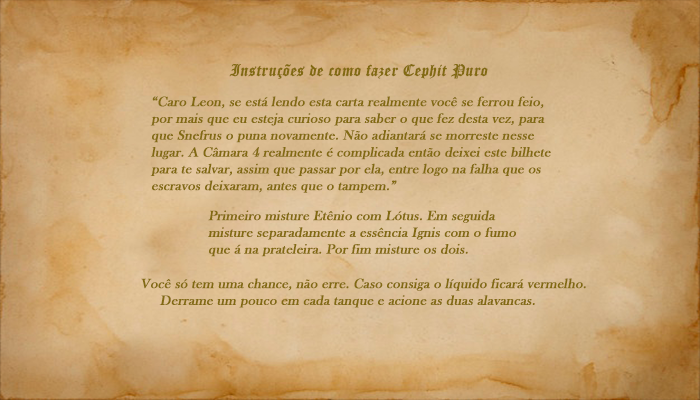
<style>
.page{position:relative;width:700px;height:400px}
.page>*{position:absolute;margin:0}
.t1{font:16px "OldEnglishTextMT";color:#826a12;font-weight:bold;font-style:italic}
.t2{font:14px "BaskOldFace";color:#826a12;font-weight:bold;font-style:italic}
</style>
<div class="page">
<p class="t1" style="left:229px;top:64px;width:259px;height:15px">Instruções de como fazer Cephit Puro</p>
<p class="t2" style="left:150px;top:96px;width:401px;height:97px">“Caro Leon, se está lendo esta carta realmente você se ferrou feio, <br>por mais que eu esteja curioso para saber o que fez desta vez, para <br>que Snefrus o puna novamente. Não adiantará se morreste nesse <br>lugar. A Câmara 4 realmente é complicada então deixei este bilhete <br>para te salvar, assim que passar por ela, entre logo na falha que os <br>escravos deixaram, antes que o tampem.”</p>
<p class="t2" style="left:208px;top:210px;width:308px;height:47px">Primeiro misture Etênio com Lótus. Em seguida <br>misture separadamente a essência Ignis com o fumo <br>que á na prateleira. Por fim misture os dois.</p>
<p class="t2" style="left:141px;top:278px;width:445px;height:30px">Você só tem uma chance, não erre. Caso consiga o líquido ficará vermelho. <br>     Derrame um pouco em cada tanque e acione as duas alavancas.</p>
</div>
